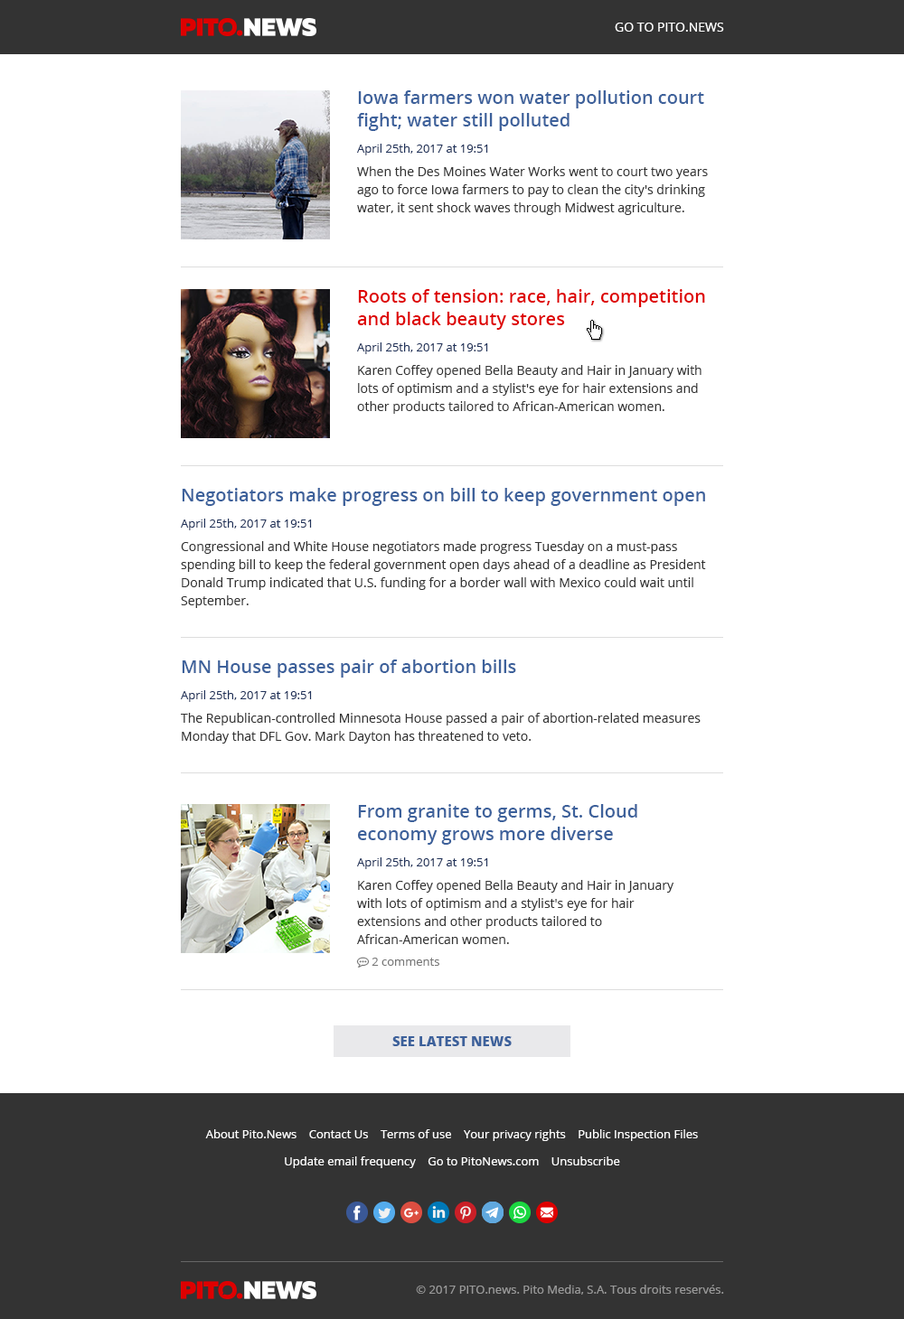
<style>
.page{position:relative;width:904px;height:1319px;background:#ffffff}
.page>*{position:absolute;margin:0}
.t1{font:12.7px "OpenSans";color:#ffffff;text-transform:uppercase}
.t2{font:12.7px/18.1px "OpenSans";color:#333333}
.t3{font:18.1px/22.6px "OpenSans-Semibold";color:#3d619b}
.t4{font:11.7px/27.1px "OpenSans";color:#20325a}
.t5{font:12.7px/22.6px "OpenSans";color:#333333}
.t6{font:18.1px/22.6px "OpenSans-Semibold";color:#de0000}
.t7{font:11.7px/18.1px "OpenSans";color:#20325a}
.t8{font:13.6px "OpenSans-Extrabold";color:#3d619b;text-transform:uppercase}
.t9{font:11.7px/27.1px "OpenSans";color:#ffffff}
.t10{font:11.7px "OpenSans";color:#999999}
</style>
<div class="page">
<p class="t1" style="left:615px;top:23px;width:109px;height:9px">Go to Pito.NEws</p>
<p class="t2" style="left:357px;top:90px;width:351px;height:125px"><span class="t3">Iowa farmers won water pollution court fight; water still polluted<br></span><span class="t4">April 25th, 2017 at 19:51<br></span><span class="t5">When</span> the Des Moines Water Works went to court two years ago to force Iowa farmers to pay to clean the city's drinking water, it sent shock waves through Midwest agriculture.</p>
<p class="t2" style="left:357px;top:289px;width:348px;height:125px"><span class="t6">Roots of tension: race, hair, competition and black beauty stores<br></span><span class="t4">April 25th, 2017 at 19:51<br></span><span class="t5">Karen Coffey</span> opened Bella Beauty and Hair in January with lots of optimism and a stylist's eye for hair extensions and other products tailored to African-American women.</p>
<p class="t2" style="left:181px;top:488px;width:525px;height:120px"><span class="t3">Negotiators make progress on bill to keep government open<br></span><span class="t4">April</span><span class="t7"> 25th, 2017 at 19:51<br></span><span class="t5">Congressional and </span>White House negotiators made progress Tuesday on a must-pass spending bill to keep the federal government open days ahead of a deadline as President Donald Trump indicated that U.S. funding for a border wall with Mexico could wait until September.</p>
<p class="t2" style="left:181px;top:660px;width:519px;height:84px"><span class="t3">MN House passes pair of abortion bills<br></span><span class="t4">April 25th, 2017 at 19:51<br></span><span class="t5">The Republican-controlle</span>d Minnesota House passed a pair of abortion-related measures Monday that DFL Gov. Mark Dayton has threatened to veto.</p>
<p class="t8" style="left:392px;top:1037px;width:120px;height:10px">SEE Latest news</p>
<p class="t9" style="left:205px;top:1130px;width:493px;height:39px;text-align:center">About Pito.News    Contact Us    Terms of use    Your privacy rights    Public Inspection Files<br>Update email frequency    Go to PitoNews.com    Unsubscribe</p>
<p class="t10" style="left:416px;top:1285px;width:308px;height:10px">© 2017 PITO.news. Pito Media, S.A. Tous droits reservés.</p>
</div>
